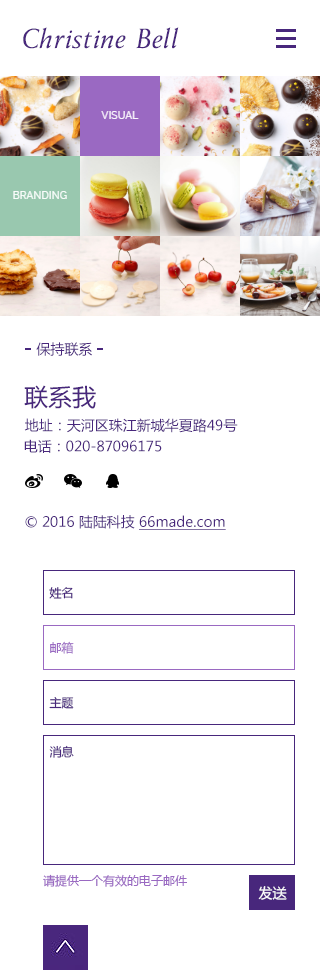
<style>
.page{position:relative;width:320px;height:970px;background:#ffffff}
.page>*{position:absolute;margin:0}
.t1{font:30px "Anziano-Italic";color:#48277c}
.t2{font:14px "MicrosoftYaHei";color:#48277c}
.t3{font:24px "MicrosoftYaHei";color:#48277c}
.t4{font:14px "MicrosoftYaHei";color:#48277c;text-decoration:underline}
.t5{font:12px "MicrosoftYaHei";color:#48277c}
.t6{font:12px "MicrosoftYaHei";color:#9a69c2}
.t7{font:14px "MicrosoftYaHei";color:#ffffff}
</style>
<div class="page">
<p class="t1" style="left:23px;top:27px;width:156px;height:22px">Christine Bell</p>
<p class="t2" style="left:36px;top:342px;width:56px;height:14px">保持联系</p>
<p class="t3" style="left:24px;top:385px;width:72px;height:24px">联系我</p>
<p class="t2" style="left:24px;top:418px;width:214px;height:15px">地址：天河区珠江新城华夏路49号</p>
<p class="t2" style="left:24px;top:439px;width:138px;height:14px">电话：020-87096175</p>
<p class="t2" style="left:25px;top:515px;width:201px;height:15px">© 2016 陆陆科技 <span class="t4">66made.com</span></p>
<p class="t5" style="left:49px;top:587px;width:24px;height:12px">姓名</p>
<p class="t6" style="left:50px;top:641px;width:24px;height:13px">邮箱</p>
<p class="t5" style="left:49px;top:697px;width:25px;height:12px">主题</p>
<p class="t5" style="left:49px;top:745px;width:25px;height:13px">消息</p>
<p class="t6" style="left:43px;top:874px;width:144px;height:13px">请提供一个有效的电子邮件</p>
<p class="t7" style="left:258px;top:886px;width:29px;height:14px">发送</p>
</div>
